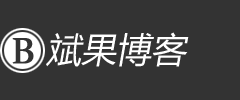
<style>
.page{position:relative;width:240px;height:100px;background:#333333}
.page>*{position:absolute;margin:0}
.t1{font:35px "MicrosoftYaHeiUI";color:#ffffff;font-style:italic}
</style>
<div class="page">
<p class="t1" style="left:46px;top:32px;width:143px;height:35px">斌果博客</p>
</div>
